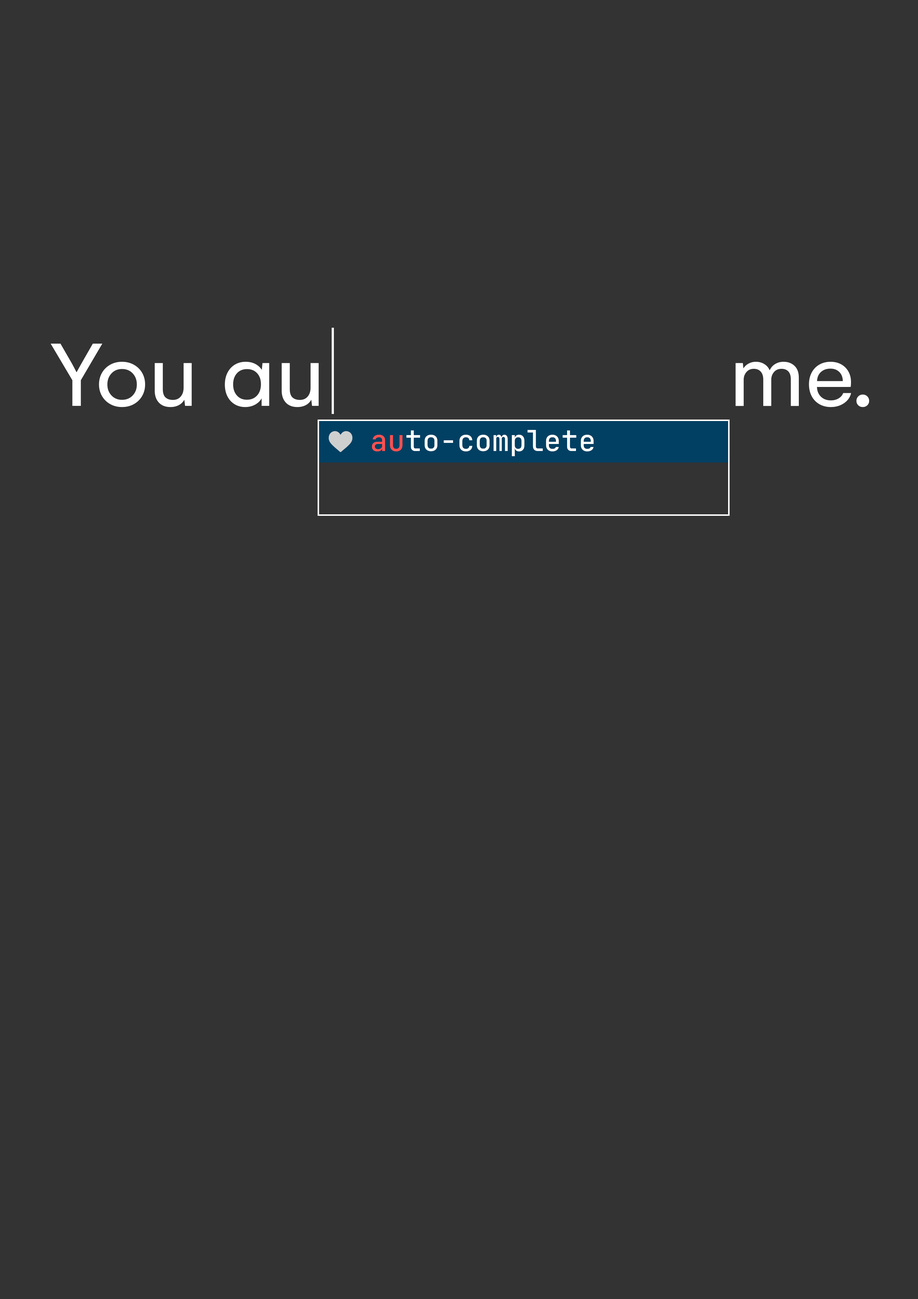
<style>
.page{position:relative;width:918px;height:1299px;background:#333333}
.page>*{position:absolute;margin:0}
.t1{font:96.9px "Gelion-Regular";color:#ffffff}
.t2{font:29px "JetBrainsMono-Medium";color:#ffffff}
.t3{font:29px "JetBrainsMono-Medium";color:#ff5050}
</style>
<div class="page">
<p class="t1" style="left:50px;top:344px;width:269px;height:63px">You au</p>
<p class="t1" style="left:736px;top:362px;width:133px;height:45px">me.</p>
<p class="t2" style="left:372px;top:430px;width:222px;height:26px"><span class="t3">au</span>to-complete</p>
</div>
